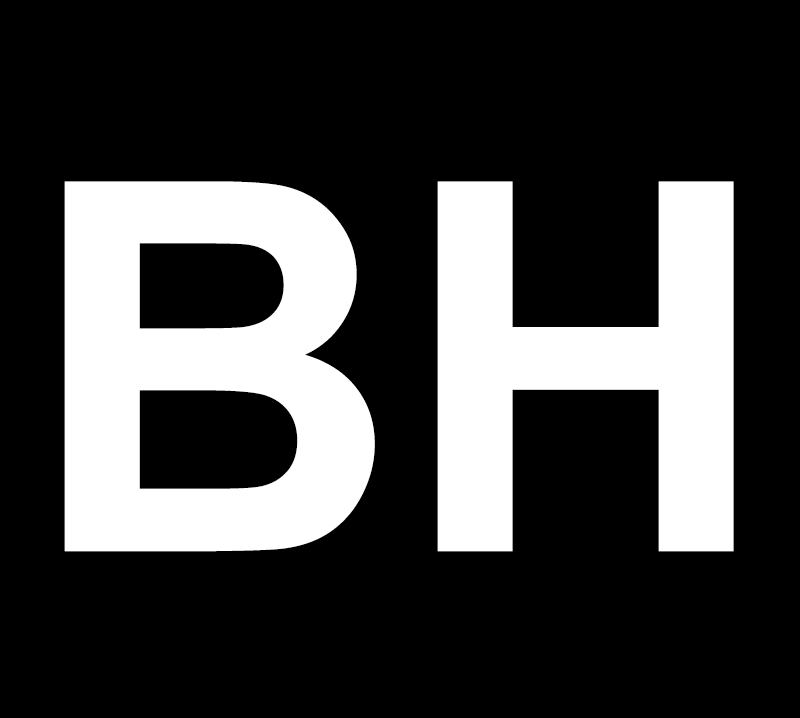
<style>
.page{position:relative;width:800px;height:718px;background:#000000}
.page>*{position:absolute;margin:0}
.t1{font:516.4px "Arial-BoldMT";color:#ffffff}
</style>
<div class="page">
<p class="t1" style="left:64px;top:181px;width:670px;height:371px">BH</p>
</div>
